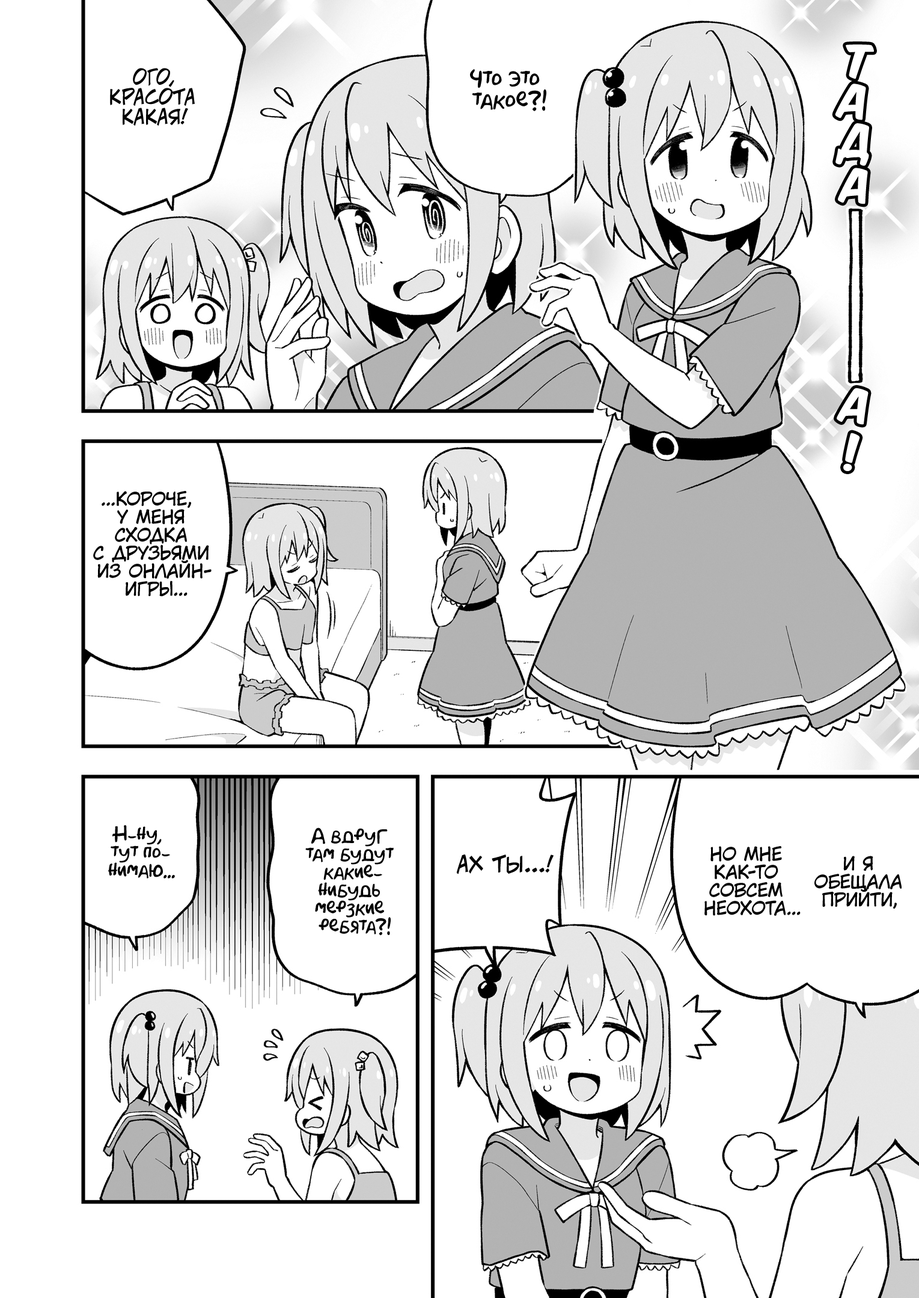
<style>
.page{position:relative;width:919px;height:1298px;background:#ffffff}
.page>*{position:absolute;margin:0}
.t1{font:39.7px "KomikaTitle-AxisRUS-LAT";color:#ffffff}
.t2{font:19.8px "v_CCJeffCampbell";color:#000000;text-transform:uppercase}
.t3{font:21.6px "AkbarPlain";color:#000000}
.t4{font:18px "KuraiVoice2";color:#000000;text-transform:uppercase}
.t5{font:18px "AkbarPlain";color:#000000}
.t6{font:21.6px "v_CCJeffCampbell";color:#000000;text-transform:uppercase}
</style>
<div class="page">
<p class="t1" style="left:845px;top:44px;width:29px;height:35px;rotate:6deg">т</p>
<p class="t2" style="left:110px;top:68px;width:85px;height:58px;text-align:center">Ого,<br>красота<br>какая!</p>
<p class="t3" style="left:470px;top:69px;width:76px;height:42px;text-align:center">Что это<br>такое?!</p>
<p class="t1" style="left:835px;top:84px;width:31px;height:36px;rotate:5deg">а</p>
<p class="t1" style="left:835px;top:123px;width:34px;height:43px;rotate:4deg">д</p>
<p class="t1" style="left:838px;top:168px;width:30px;height:36px;rotate:3deg">а</p>
<p class="t1" style="left:836px;top:388px;width:32px;height:37px;rotate:7deg">а</p>
<p class="t1" style="left:843px;top:433px;width:17px;height:38px">!</p>
<p class="t4" style="left:93px;top:491px;width:119px;height:106px;text-align:center">...Короче,<br>у меня<br>сходка<br>с друзьями<br>из онлайн-<br>игры...</p>
<p class="t5" style="left:108px;top:825px;width:67px;height:53px;text-align:center">Н-ну,<br>тут по-<br>нимаю...</p>
<p class="t5" style="left:305px;top:827px;width:89px;height:109px;text-align:center">А вдруг<br>там будут<br>какие-<br>нибудь<br>мерзкие<br>ребята?!</p>
<p class="t6" style="left:456px;top:854px;width:97px;height:20px">Ах ты...!</p>
<p class="t4" style="left:704px;top:846px;width:96px;height:70px;text-align:center">но мне<br>как-то<br>совсем<br>неохота...</p>
<p class="t4" style="left:814px;top:856px;width:87px;height:53px;text-align:center">И я<br>обещала<br>прийти,</p>
</div>
